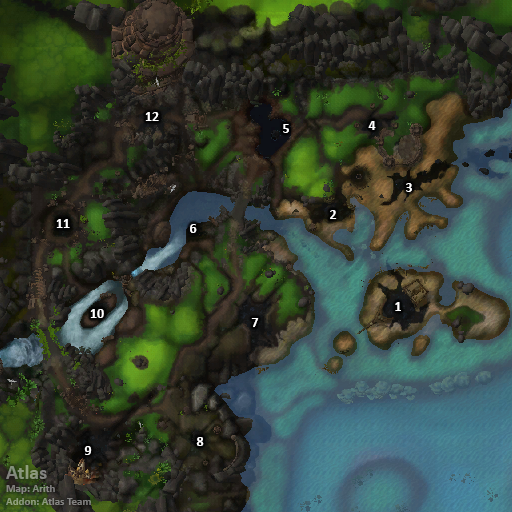
<style>
.page{position:relative;width:512px;height:512px}
.page>*{position:absolute;margin:0}
.t1{font:14px "Calibri-Bold";color:#ffffff}
.t2{font:11px "Calibri-Bold";color:#858d7d}
.t3{font:20px "Calibri-Bold";color:#858d7d}
</style>
<div class="page">
<p class="t1" style="left:145px;top:112px;width:14px;height:9px">12</p>
<p class="t1" style="left:283px;top:124px;width:6px;height:9px">5</p>
<p class="t1" style="left:368px;top:121px;width:8px;height:9px">4</p>
<p class="t1" style="left:406px;top:183px;width:6px;height:9px">3</p>
<p class="t1" style="left:56px;top:219px;width:14px;height:9px">11</p>
<p class="t1" style="left:330px;top:210px;width:7px;height:9px">2</p>
<p class="t1" style="left:190px;top:224px;width:7px;height:9px">6</p>
<p class="t1" style="left:395px;top:302px;width:6px;height:9px">1</p>
<p class="t1" style="left:90px;top:309px;width:14px;height:9px">10</p>
<p class="t1" style="left:251px;top:318px;width:8px;height:9px">7</p>
<p class="t1" style="left:196px;top:437px;width:8px;height:9px">8</p>
<p class="t1" style="left:84px;top:446px;width:8px;height:9px">9</p>
<p class="t2" style="left:6px;top:465px;width:85px;height:40px"><span class="t3">Atlas<br></span>Map: Arith<br>Addon: Atlas Team</p>
</div>
